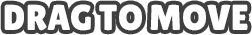
<style>
.page{position:relative;width:252px;height:35px;background:#ffffff}
.page>*{position:absolute;margin:0}
.t1{font:36px "LilitaOne";color:#ffffff}
</style>
<div class="page">
<p class="t1" style="left:4px;top:4px;width:244px;height:27px">DRAG TO MOVE</p>
</div>
